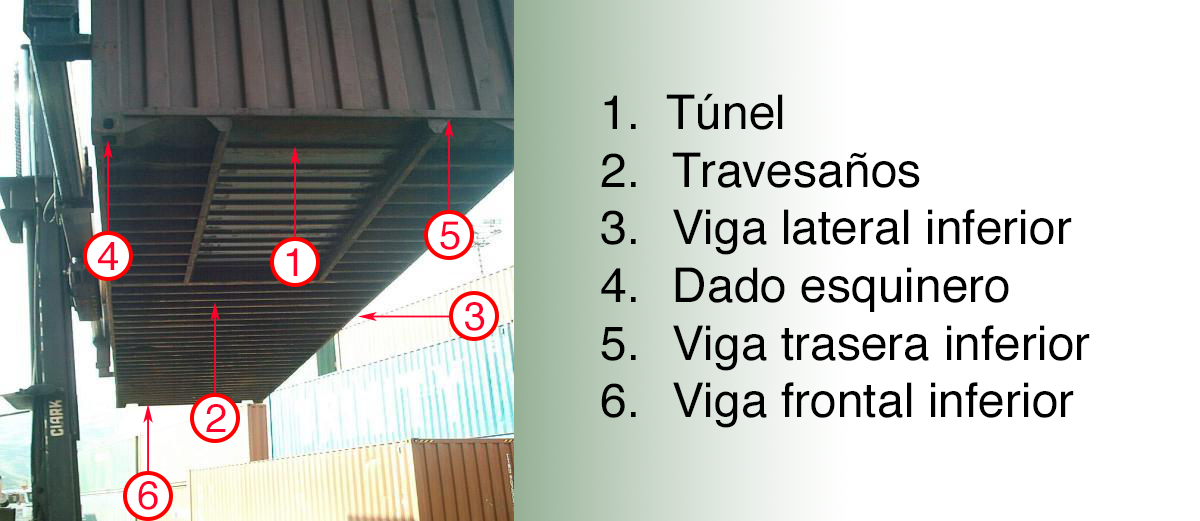
<style>
.page{position:relative;width:1200px;height:521px;background:#ffffff}
.page>*{position:absolute;margin:0}
.t1{font:48px "Helvetica";color:#000000}
.t2{font:40px "Helvetica";color:#ff012b}
</style>
<div class="page">
<p class="t1" style="left:601px;top:93px;width:489px;height:335px">1.  Túnel<br>2. Travesaños<br>3. Viga lateral inferior<br>4. Dado esquinero<br>5. Viga trasera inferior<br>6. Viga frontal inferior</p>
<p class="t2" style="left:440px;top:221px;width:20px;height:29px">5</p>
<p class="t2" style="left:98px;top:242px;width:20px;height:28px">4</p>
<p class="t2" style="left:286px;top:248px;width:12px;height:28px">1</p>
<p class="t2" style="left:465px;top:302px;width:20px;height:29px">3</p>
<p class="t2" style="left:206px;top:404px;width:20px;height:28px">2</p>
<p class="t2" style="left:138px;top:481px;width:20px;height:29px">6</p>
</div>
